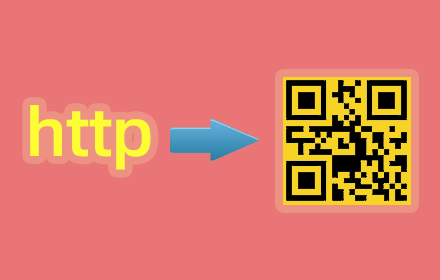
<style>
.page{position:relative;width:440px;height:280px;background:#e97576}
.page>*{position:absolute;margin:0}
.t1{font:67px "AlibabaPuHuiTi-Medium";letter-spacing:-0.02em;color:#fefd33}
</style>
<div class="page">
<p class="t1" style="left:30px;top:105px;width:121px;height:65px">http</p>
</div>
